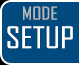
<style>
.page{position:relative;width:80px;height:65px;background:#004a80}
.page>*{position:absolute;margin:0}
.t1{font:16.8px "AgencyFB-Reg";color:#b8b8b8;scale:1.23 1}
.t2{font:28.4px "AgencyFB-Reg";color:#ffffff;scale:1.23 1}
</style>
<div class="page">
<p class="t1" style="left:23px;top:6px;width:34px;height:14px">MODE</p>
<p class="t2" style="left:7px;top:26px;width:66px;height:23px">SETUP</p>
</div>
